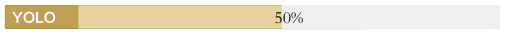
<style>
.page{position:relative;width:507px;height:35px;background:#efefef}
.page>*{position:absolute;margin:0}
.t1{font:13.3px "FZLTCHK--GBK1-0";color:#ffffff}
.t2{font:17px "FZBSK--GBK1-0"}
</style>
<div class="page">
<p class="t1" style="left:12px;top:11px;width:44px;height:12px">YOLO</p>
<p class="t2" style="left:275px;top:11px;width:28px;height:13px">50%</p>
</div>
